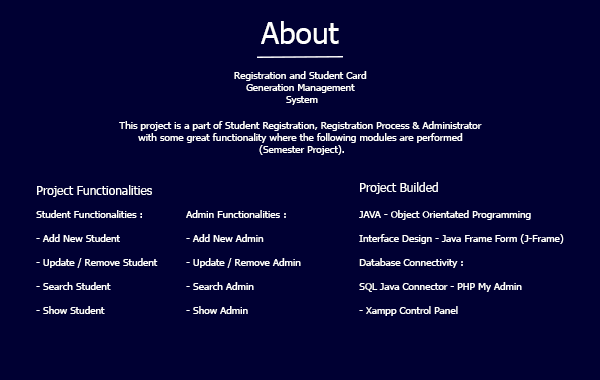
<style>
.page{position:relative;width:600px;height:380px;background:#000033}
.page>*{position:absolute;margin:0}
.t1{font:30px "Tahoma";color:#ffffff}
.t2{font:10px "Tahoma";color:#ffffff}
.t3{font:12px "Tahoma";color:#ffffff}
</style>
<div class="page">
<p class="t1" style="left:261px;top:21px;width:78px;height:23px">About</p>
<p class="t2" style="left:234px;top:71px;width:133px;height:34px;text-align:center">Registration and Student Card <br>Generation Management <br>System</p>
<p class="t2" style="left:119px;top:121px;width:363px;height:34px;text-align:center">This project is a part of Student Registration, Registration Process &amp; Administrator <br>with some great functionality where the following modules are performed <br>(Semester Project).</p>
<p class="t3" style="left:37px;top:185px;width:115px;height:12px">Project Functionalities</p>
<p class="t3" style="left:360px;top:182px;width:78px;height:12px">Project Builded</p>
<p class="t2" style="left:36px;top:210px;width:122px;height:104px">Student Functionalities :<br><br>- Add New Student<br><br>- Update / Remove Student<br><br>- Search Student<br><br>- Show Student</p>
<p class="t2" style="left:186px;top:210px;width:115px;height:104px">Admin Functionalities :<br><br>- Add New Admin<br><br>- Update / Remove Admin<br><br>- Search Admin<br><br>- Show Admin</p>
<p class="t2" style="left:359px;top:210px;width:205px;height:106px">JAVA - Object Orientated Programming<br><br>Interface Design - Java Frame Form (J-Frame)<br><br>Database Connectivity : <br><br>SQL Java Connector - PHP My Admin <br><br>- Xampp Control Panel</p>
</div>
